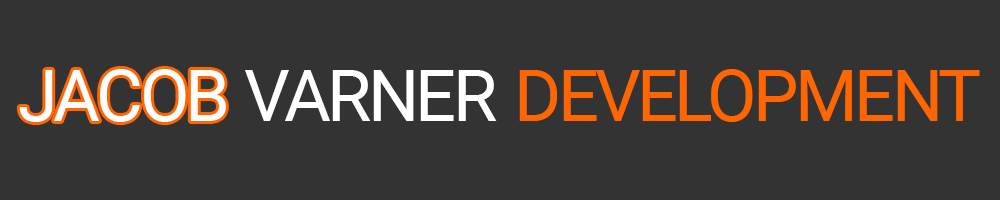
<style>
.page{position:relative;width:1000px;height:200px;background:#333333}
.page>*{position:absolute;margin:0}
.t1{font:72px "Roboto-Regular";letter-spacing:-0.05em;color:#ffffff}
.t2{font:72px "Roboto-Regular";letter-spacing:-0.05em;color:#ff6600}
</style>
<div class="page">
<p class="t1" style="left:19px;top:69px;width:207px;height:53px">JACOB</p>
<p class="t1" style="left:245px;top:70px;width:252px;height:51px">VARNER</p>
<p class="t2" style="left:519px;top:69px;width:461px;height:53px">DEVELOPMENT</p>
</div>
